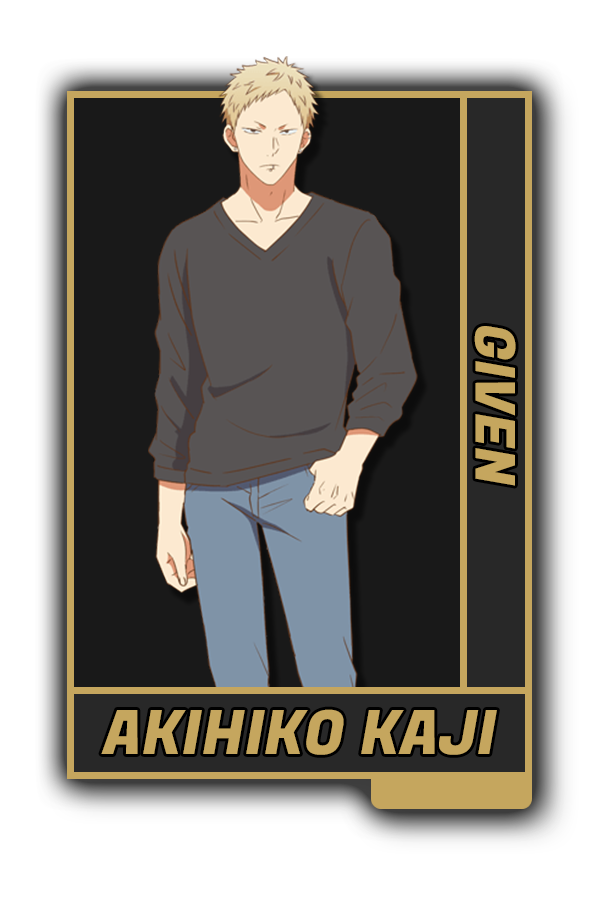
<style>
.page{position:relative;width:600px;height:900px;background:#ffffff}
.page>*{position:absolute;margin:0}
.t1{font:54.9px "FugazOne-Regular";color:#c5a65e}
.t2{font:61.1px "FugazOne-Regular";color:#c5a65e}
</style>
<div class="page">
<p class="t1" style="left:474px;top:326px;width:42px;height:160px;rotate:90deg">GIVEN</p>
<p class="t2" style="left:101px;top:709px;width:396px;height:46px">AKIHIKO KAJI</p>
</div>
